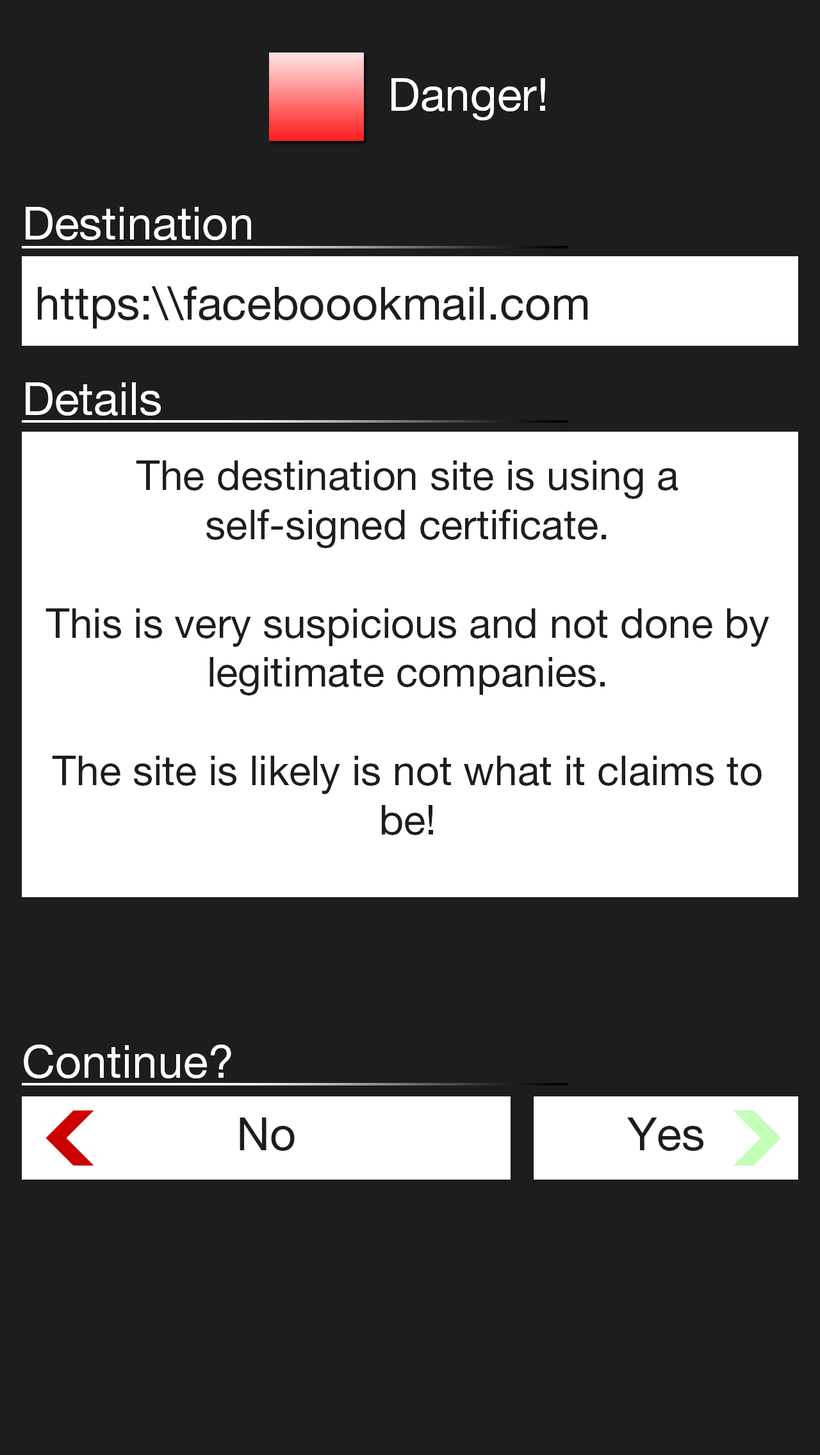
<style>
.page{position:relative;width:820px;height:1455px;background:#1d1d1d}
.page>*{position:absolute;margin:0}
.t1{font:46.1px "HelveticaNeueLTPro-Roman";color:#ffffff}
.t2{font:46.1px "HelveticaNeueLTPro-Roman";color:#1d1d1d}
.t3{font:41px "HelveticaNeueLTPro-Roman";color:#1d1d1d}
.t4{font:46.1px "HelveticaNeueLTPro-Roman";color:#1c1c1c}
</style>
<div class="page">
<p class="t1" style="left:391px;top:78px;width:154px;height:42px">Danger!</p>
<p class="t1" style="left:26px;top:207px;width:225px;height:33px">Destination</p>
<p class="t2" style="left:38px;top:286px;width:549px;height:42px">https:\\faceboookmail.com</p>
<p class="t1" style="left:26px;top:382px;width:135px;height:34px">Details</p>
<p class="t3" style="left:45px;top:460px;width:724px;height:375px;text-align:center">The destination site is using a self-signed certificate.<br><br>This is very suspicious and not done by legitimate companies.<br><br>The site is likely is not what it claims to be!</p>
<p class="t1" style="left:24px;top:1044px;width:207px;height:34px">Continue?</p>
<p class="t4" style="left:239px;top:1117px;width:56px;height:34px">No</p>
<p class="t4" style="left:627px;top:1117px;width:76px;height:34px">Yes</p>
</div>
